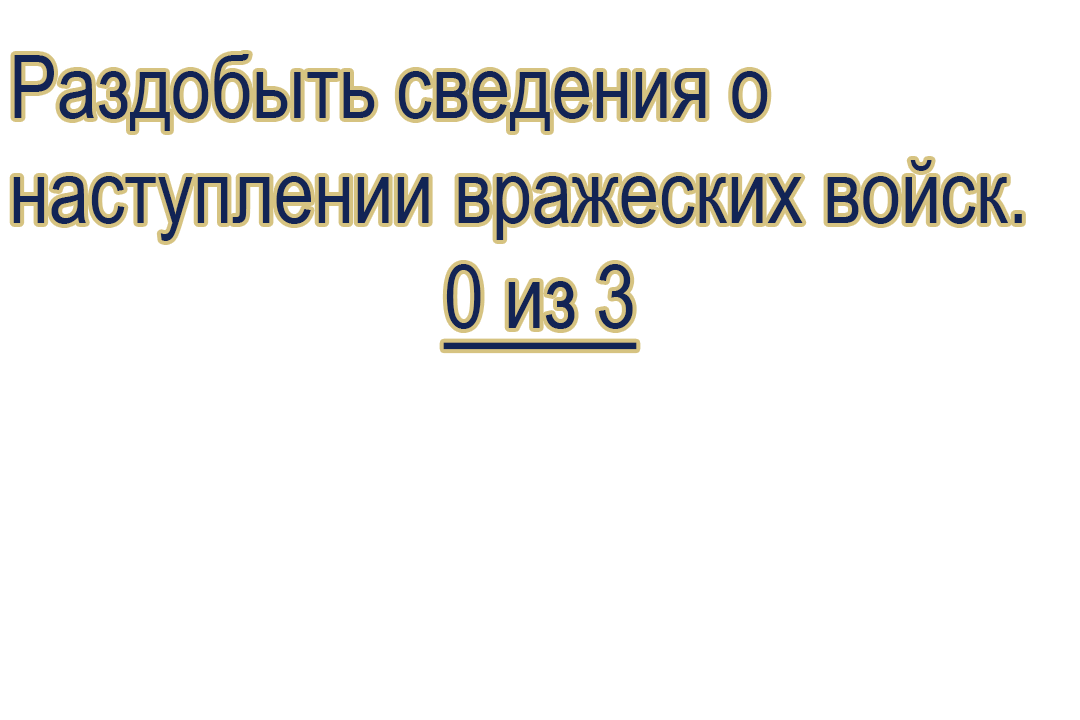
<style>
.page{position:relative;width:1080px;height:720px;background:#ffffff}
.page>*{position:absolute;margin:0}
.t1{font:87.5px "ArialNarrow";color:#122455}
.t2{font:87.5px "ArialNarrow";color:#122455;text-decoration:underline}
</style>
<div class="page">
<p class="t1" style="left:13px;top:54px;width:1009px;height:296px">Раздобыть сведения о <br>наступлении вражеских войск. <br><span class="t2">0 из 3</span></p>
</div>
